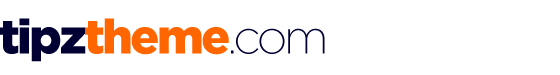
<style>
.page{position:relative;width:560px;height:75px;background:#ffffff}
.page>*{position:absolute;margin:0}
.t1{font:48px "GothamBlack";letter-spacing:-0.05em;color:#ff6600}
.t2{font:48px "GothamBlack";letter-spacing:-0.05em;color:#000033}
.t3{font:48px "GothamExtraLight";letter-spacing:-0.075em;color:#000033}
</style>
<div class="page">
<p class="t1" style="left:0px;top:18px;width:325px;height:44px"><span class="t2">tipz</span>theme<span class="t3">.com</span></p>
</div>
